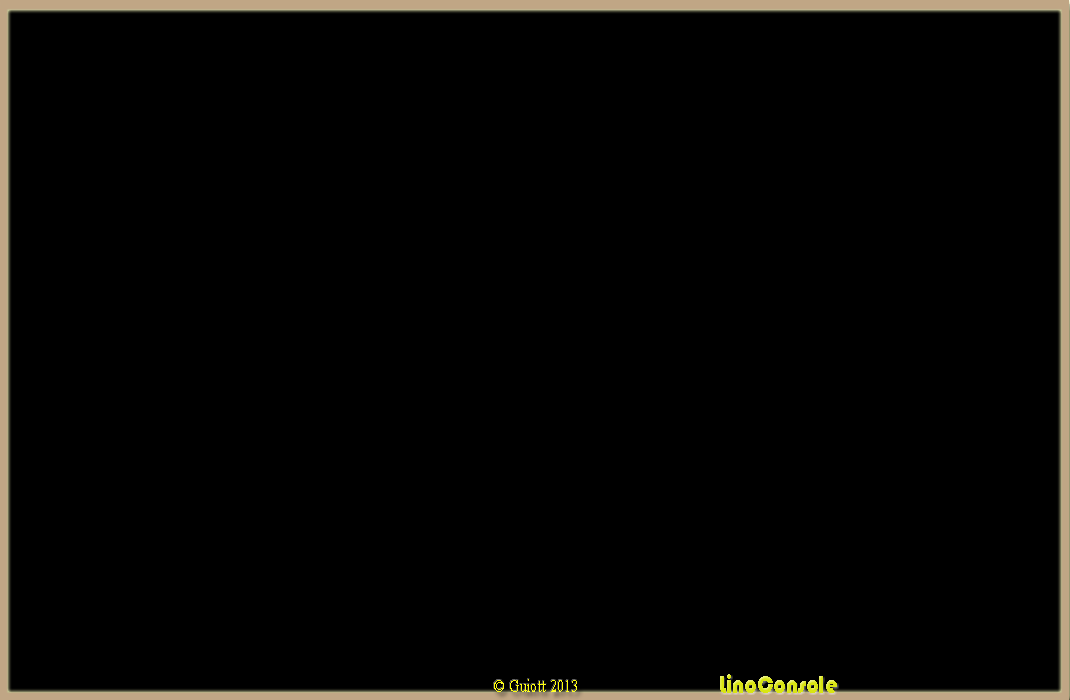
<style>
.page{position:relative;width:1070px;height:700px;background:#000000}
.page>*{position:absolute;margin:0}
.t1{font:26px "Bauhaus93";color:#d9e513;scale:0.84 1}
.t2{font:18px "TimesNewRomanPSMT";color:#ffff05;scale:0.84 1}
</style>
<div class="page">
<p class="t1" style="left:720px;top:674px;width:117px;height:19px">LinoConsole</p>
<p class="t2" style="left:494px;top:679px;width:83px;height:13px">© Guiott 2013</p>
</div>
